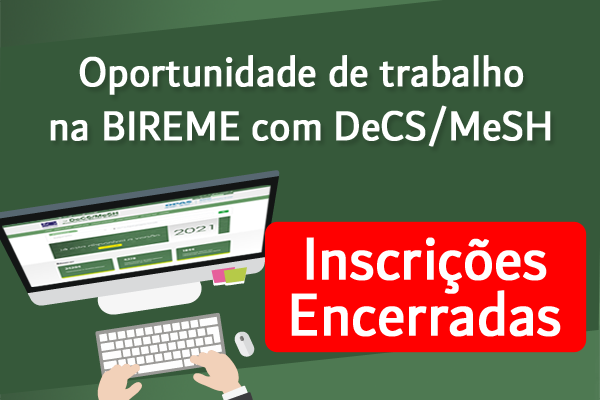
<style>
.page{position:relative;width:600px;height:400px;background:#36593a}
.page>*{position:absolute;margin:0}
.t1{font:44.5px "Dubai-Regular";color:#ffffff;font-weight:bold;scale:0.9 1}
.t2{font:63.9px/56px "Dubai-Regular";color:#ffffff;font-weight:bold;scale:0.9 1}
</style>
<div class="page">
<p class="t1" style="left:50px;top:55px;width:501px;height:92px;text-align:center">Oportunidade de trabalho<br>na BIREME com DeCS/MeSH</p>
<p class="t2" style="left:291px;top:237px;width:270px;height:100px;text-align:center">Inscrições<br>Encerradas</p>
</div>
